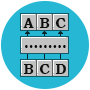
<style>
.page{position:relative;width:90px;height:90px;background:#25b7d3}
.page>*{position:absolute;margin:0}
.t1{font:14px "BookmanOldStyle-Bold";color:#000000}
</style>
<div class="page">
<p class="t1" style="left:23px;top:18px;width:11px;height:10px;opacity:0.96">A</p>
<p class="t1" style="left:39px;top:18px;width:11px;height:10px;opacity:0.96">B</p>
<p class="t1" style="left:55px;top:18px;width:11px;height:10px;opacity:0.96">C</p>
<p class="t1" style="left:25px;top:45px;width:41px;height:3px">.........</p>
<p class="t1" style="left:23px;top:64px;width:11px;height:10px;opacity:0.96">B</p>
<p class="t1" style="left:39px;top:64px;width:11px;height:10px;opacity:0.96">C</p>
<p class="t1" style="left:55px;top:64px;width:11px;height:10px;opacity:0.96">D</p>
</div>
